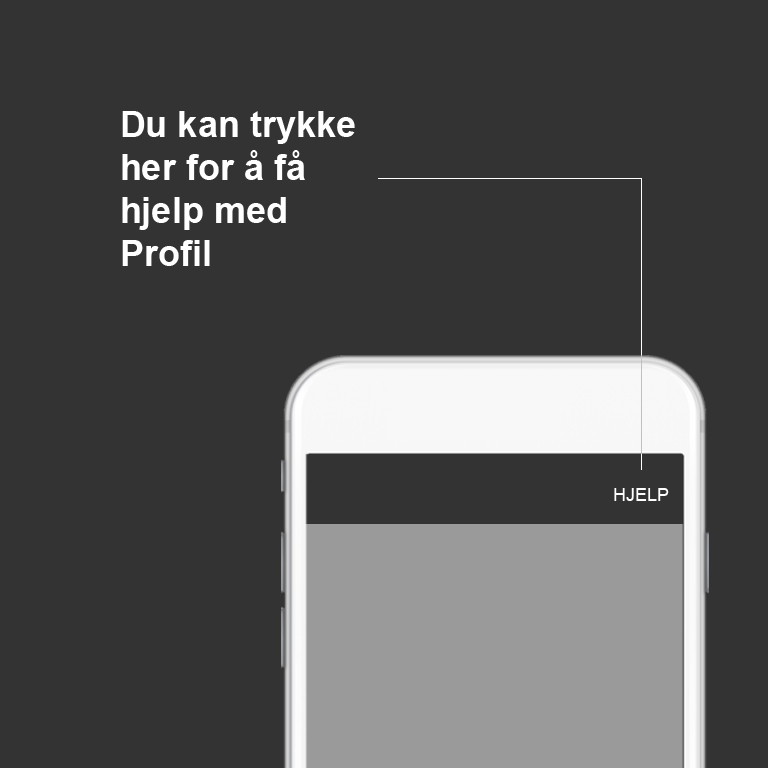
<style>
.page{position:relative;width:768px;height:768px;background:#333333}
.page>*{position:absolute;margin:0}
.t1{font:36px "Arial-BoldMT";color:#ffffff}
.t2{font:18px "ArialMT";color:#ffffff}
</style>
<div class="page">
<p class="t1" style="left:122px;top:111px;width:233px;height:155px">Du kan trykke her for å få hjelp med <br>Profil</p>
<p class="t2" style="left:614px;top:488px;width:55px;height:13px">HJELP</p>
</div>
